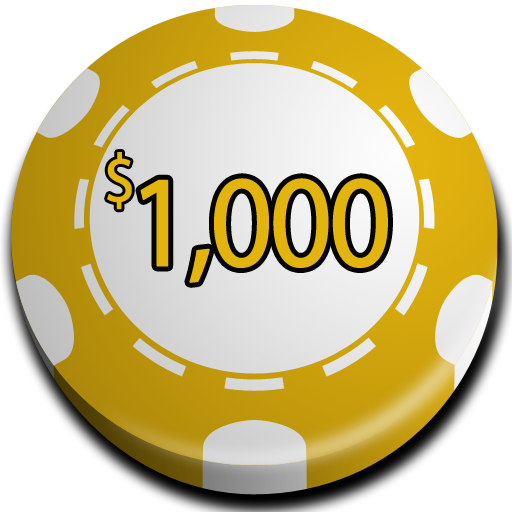
<style>
.page{position:relative;width:512px;height:512px;background:#ffffff}
.page>*{position:absolute;margin:0}
.t1{font:117.9px "MyriadPro-Regular";letter-spacing:-0.05em;color:#e4b40e;font-variant:small-caps;font-weight:bold;scale:0.92 1}
.t2{font:225px "MyriadPro-Regular";letter-spacing:-0.05em;color:#e4b40e;font-variant:small-caps;font-weight:bold;scale:0.92 1}
</style>
<div class="page">
<p class="t1" style="left:107px;top:152px;width:25px;height:58px">$</p>
<p class="t2" style="left:140px;top:178px;width:248px;height:105px">1,000</p>
</div>
